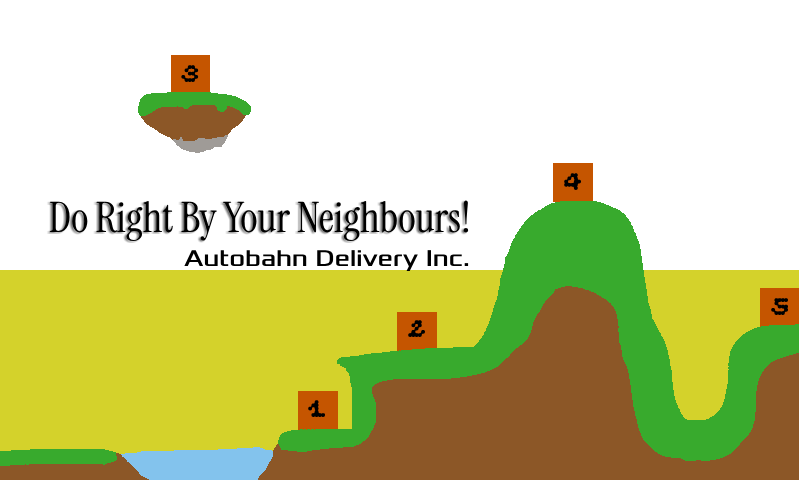
<style>
.page{position:relative;width:799px;height:480px;background:#ffffff}
.page>*{position:absolute;margin:0}
.t1{font:24px "ARKESDenseBold";color:#000000}
.t2{font:42px "InstrumentSerif-Regular";color:#000000}
.t3{font:24px "Xolonium";color:#000000}
</style>
<div class="page">
<p class="t1" style="left:181px;top:65px;width:18px;height:17px">3</p>
<p class="t1" style="left:564px;top:173px;width:18px;height:18px">4</p>
<p class="t2" style="left:49px;top:200px;width:420px;height:42px">Do Right By Your Neighbours!</p>
<p class="t3" style="left:184px;top:250px;width:285px;height:22px">Autobahn Delivery Inc.</p>
<p class="t1" style="left:771px;top:298px;width:18px;height:18px">5</p>
<p class="t1" style="left:408px;top:320px;width:18px;height:18px">2</p>
<p class="t1" style="left:308px;top:400px;width:18px;height:17px">1</p>
</div>
